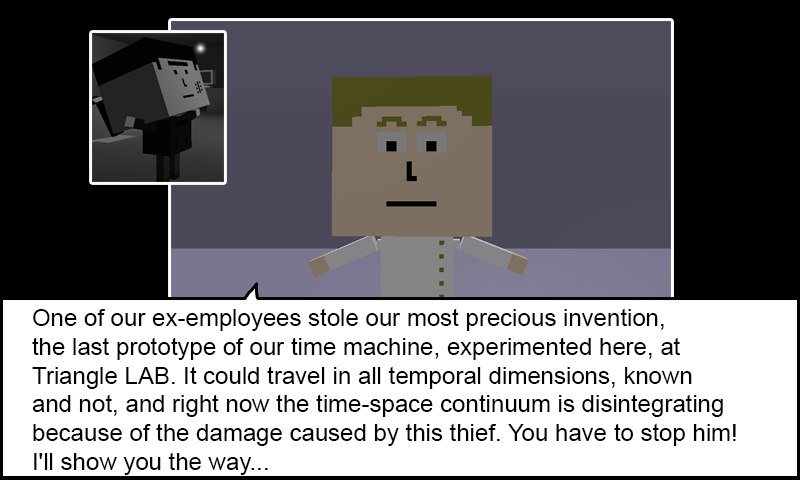
<style>
.page{position:relative;width:800px;height:480px;background:#ffffff}
.page>*{position:absolute;margin:0}
.t1{font:24px "ArialMT";color:#000000}
</style>
<div class="page">
<p class="t1" style="left:32px;top:308px;width:704px;height:167px">One of our ex-employees stole our most precious invention, <br>the last prototype of our time machine, experimented here, at <br>Triangle LAB. It could travel in all temporal dimensions, known <br>and not, and right now the time-space continuum is disintegrating<br>because of the damage caused by this thief. You have to stop him! <br>I'll show you the way...</p>
</div>
